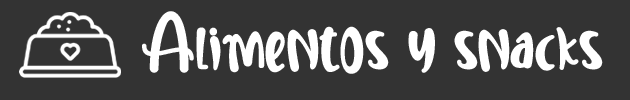
<style>
.page{position:relative;width:630px;height:100px;background:#333333}
.page>*{position:absolute;margin:0}
.t1{font:54.5px "SweetUnicorn";color:#ffffff}
</style>
<div class="page">
<p class="t1" style="left:142px;top:11px;width:461px;height:63px">Alimentos y snacks</p>
</div>
